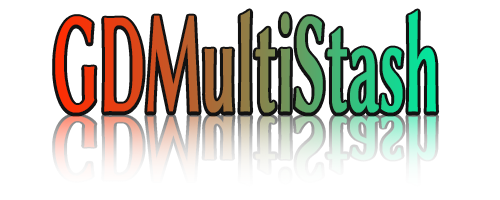
<style>
.page{position:relative;width:500px;height:200px;background:#ffffff}
.page>*{position:absolute;margin:0}
.t1{font:143.6px "LinBiolinumB";scale:0.42 1}
</style>
<div class="page">
<p class="t1" style="left:55px;top:10px;width:381px;height:103px">GDMultiStash</p>
</div>
